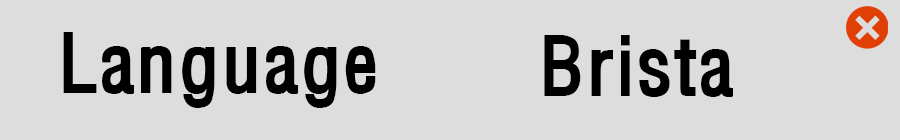
<style>
.page{position:relative;width:900px;height:140px;background:#dddddd}
.page>*{position:absolute;margin:0}
.t1{font:72px "MoeumTXB-HM";color:#000000}
</style>
<div class="page">
<p class="t1" style="left:63px;top:32px;width:313px;height:76px">Language</p>
<p class="t1" style="left:544px;top:35px;width:189px;height:62px">Brista</p>
</div>
